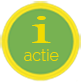
<style>
.page{position:relative;width:82px;height:82px;background:#77b252}
.page>*{position:absolute;margin:0}
.t1{font:39.8px "Brussels-Light";color:#f1db00;scale:1.69 1}
.t2{font:16px "Raleway-Light";color:#f1db00}
</style>
<div class="page">
<p class="t1" style="left:32px;top:16px;width:19px;height:27px">i</p>
<p class="t2" style="left:24px;top:49px;width:35px;height:12px">actie</p>
</div>
